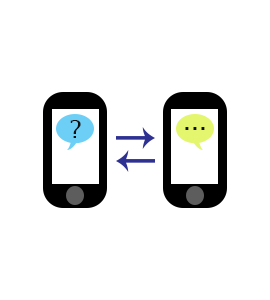
<style>
.page{position:relative;width:270px;height:300px;background:#ffffff}
.page>*{position:absolute;margin:0}
.t1{font:25px "LucidaFax";color:#0f0f0f}
</style>
<div class="page">
<p class="t1" style="left:70px;top:120px;width:11px;height:18px">?</p>
<p class="t1" style="left:185px;top:127px;width:20px;height:3px">...</p>
</div>
